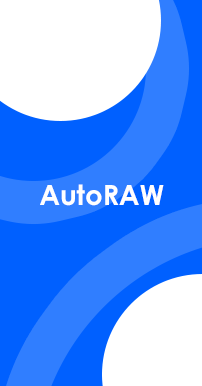
<style>
.page{position:relative;width:202px;height:386px;background:#0060ff}
.page>*{position:absolute;margin:0}
.t1{font:27.7px "CenturyGothic-Bold";color:#ffffff}
</style>
<div class="page">
<p class="t1" style="left:40px;top:184px;width:124px;height:22px">AutoRAW</p>
</div>
